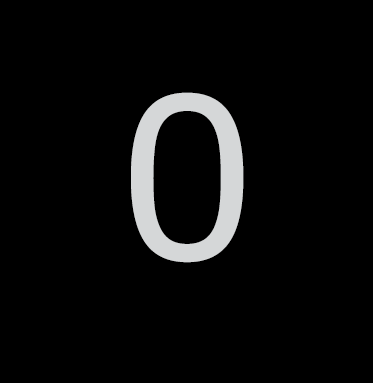
<style>
.page{position:relative;width:373px;height:383px;background:#000000}
.page>*{position:absolute;margin:0}
.t1{font:223.1px "Verdana";color:#d5d7d8}
</style>
<div class="page">
<p class="t1" style="left:131px;top:92px;width:113px;height:171px">0</p>
</div>
